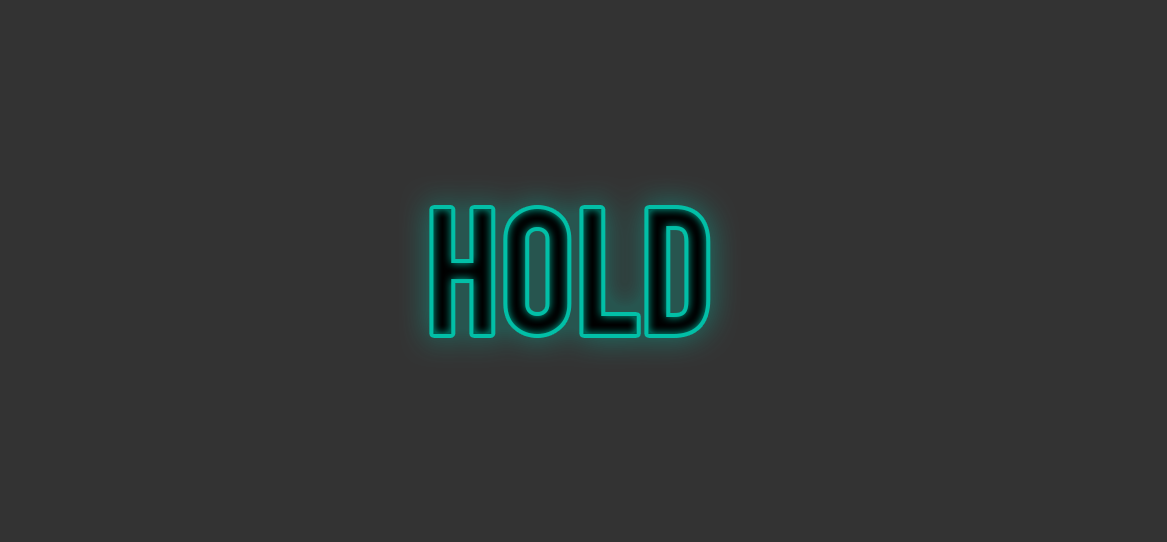
<style>
.page{position:relative;width:1167px;height:542px;background:#333333}
.page>*{position:absolute;margin:0}
.t1{font:175.4px "DINEngschrift"}
</style>
<div class="page">
<p class="t1" style="left:433px;top:209px;width:274px;height:125px">HOLD</p>
</div>
